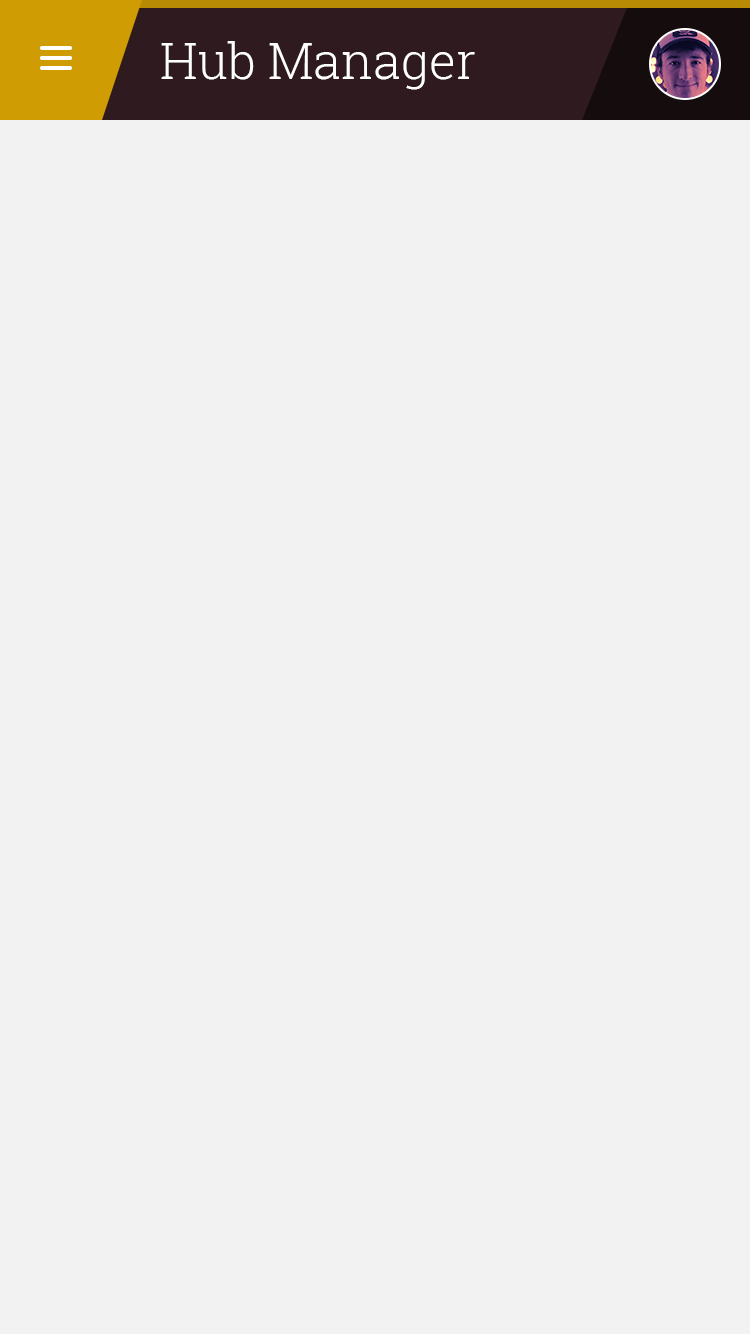
<style>
.page{position:relative;width:750px;height:1334px;background:#f2f2f2}
.page>*{position:absolute;margin:0}
.t1{font:50px "RobotoSlab-Light";color:#ffffff}
</style>
<div class="page">
<p class="t1" style="left:161px;top:41px;width:314px;height:49px">Hub Manager</p>
</div>
